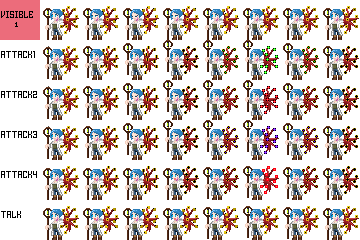
<style>
.page{position:relative;width:360px;height:240px;background:#ffffff}
.page>*{position:absolute;margin:0}
.t1{font:10px "HomespunTTBRK";color:#000000}
</style>
<div class="page">
<p class="t1" style="left:1px;top:11px;width:32px;height:7px">VISIBLE</p>
<p class="t1" style="left:1px;top:51px;width:34px;height:7px">ATTACK1</p>
<p class="t1" style="left:1px;top:91px;width:36px;height:7px">ATTACK2</p>
<p class="t1" style="left:1px;top:131px;width:36px;height:7px">ATTACK3</p>
<p class="t1" style="left:1px;top:171px;width:36px;height:7px">ATTACK4</p>
<p class="t1" style="left:1px;top:211px;width:20px;height:7px">TALK</p>
</div>
